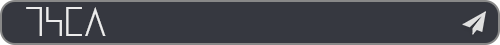
<style>
.page{position:relative;width:500px;height:45px;background:#363840}
.page>*{position:absolute;margin:0}
.t1{font:37.5px "AVA";color:#ececec}
</style>
<div class="page">
<p class="t1" style="left:26px;top:7px;width:80px;height:29px">Thea</p>
</div>
